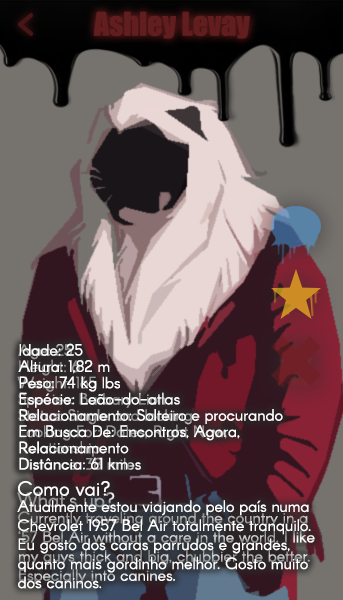
<style>
.page{position:relative;width:343px;height:600px}
.page>*{position:absolute;margin:0}
.t1{font:16px "Arcon-Regular";color:#ffffff}
.t2{font:16px/22px "Arcon-Regular";color:#ffffff}
.t3{font:20px "Arcon-Regular";color:#ffffff}
</style>
<div class="page">
<p class="t1" style="left:18px;top:343px;width:265px;height:127px">Idade: 25<br>Altura: 1,82 m<br>Peso: 74 kg<br>Espécie: Leão-do-atlas<br>Relacionamento: Solteiro e procurando<br>Em Busca De: Encontros, Agora,<br>Relacionamento<br>Distância: 61 km</p>
<p class="t2" style="left:17px;top:481px;width:294px;height:108px"><span class="t3">Como vai?<br></span><span class="t1">Atualmente estou viajando pelo país numa<br></span>Chevrolet 1957 Bel Air totalmente tranquilo.<br>Eu gosto dos caras parrudos e grandes,<br>quanto mais gordinho melhor. Gosto muito<br>dos caninos.</p>
</div>
